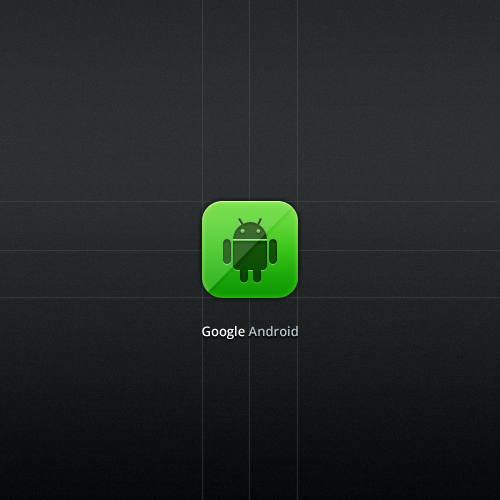
<style>
.page{position:relative;width:500px;height:500px}
.page>*{position:absolute;margin:0}
.t1{font:13px "OpenSans-Semibold";color:#b2c1c5}
.t2{font:13px "OpenSans-Semibold";color:#ffffff;text-transform:uppercase}
.t3{font:13px "OpenSans-Semibold";color:#ffffff}
</style>
<div class="page">
<p class="t1" style="left:202px;top:326px;width:96px;height:13px"><span class="t2">G</span><span class="t3">oogle </span>Android</p>
</div>
